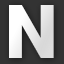
<style>
.page{position:relative;width:64px;height:64px}
.page>*{position:absolute;margin:0}
.t1{font:75px "Roboto-Black";color:#ececec}
</style>
<div class="page">
<p class="t1" style="left:9px;top:5px;width:45px;height:53px">N</p>
</div>
